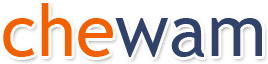
<style>
.page{position:relative;width:268px;height:64px;background:#ffffff}
.page>*{position:absolute;margin:0}
.t1{font:72px "TrebuchetMS";color:#f26101}
.t2{font:72px "TrebuchetMS";color:#304269}
</style>
<div class="page">
<p class="t1" style="left:3px;top:3px;width:259px;height:54px">che<span class="t2">wam</span></p>
</div>
